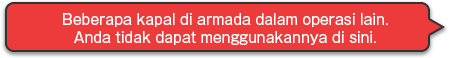
<style>
.page{position:relative;width:450px;height:58px;background:#ed3b3b}
.page>*{position:absolute;margin:0}
.t1{font:14px/18px "GothicMB101Pro-Regular";color:#ffffff}
</style>
<div class="page">
<p class="t1" style="left:63px;top:13px;width:325px;height:32px;text-align:center">Beberapa kapal di armada dalam operasi lain.<br>Anda tidak dapat menggunakannya di sini.</p>
</div>
